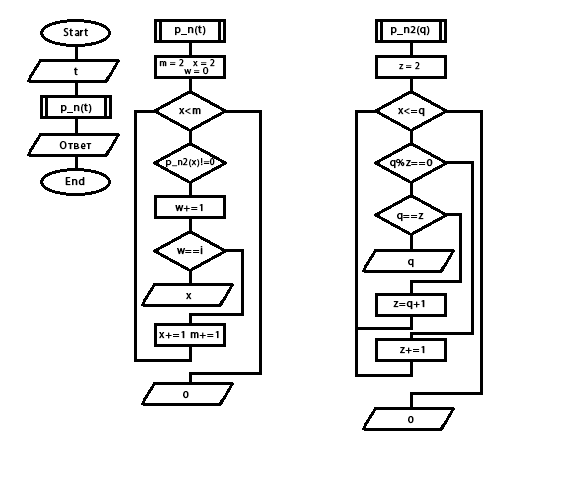
<style>
.page{position:relative;width:565px;height:480px;background:#ffffff}
.page>*{position:absolute;margin:0}
.t1{font:10.7px "MyriadPro-Regular";letter-spacing:0.05em;color:#000000;font-weight:bold}
.t2{font:10.7px/80px "MyriadPro-Regular";letter-spacing:0.05em;color:#000000;font-weight:bold}
.t3{font:9.3px/80px "MyriadPro-Regular";letter-spacing:0.05em;color:#000000;font-weight:bold}
.t4{font:9.3px "MyriadPro-Regular";letter-spacing:0.05em;color:#000000;font-weight:bold}
</style>
<div class="page">
<p class="t1" style="left:63px;top:28px;width:25px;height:9px">Start</p>
<p class="t1" style="left:175px;top:25px;width:31px;height:11px">p_n(t)</p>
<p class="t1" style="left:391px;top:26px;width:39px;height:10px">p_n2(q)</p>
<p class="t2" style="left:159px;top:59px;width:25px;height:8px"><span class="t3">m = 2<br></span>    x = 2<br>    w = 0</p>
<p class="t2" style="left:193px;top:59px;width:22px;height:8px"><span class="t3">x = 2<br></span>    x = 2<br>    w = 0</p>
<p class="t2" style="left:399px;top:62px;width:21px;height:8px"><span class="t3">z = 2<br></span>    x = 2<br>    w = 0</p>
<p class="t1" style="left:74px;top:67px;width:4px;height:9px">t</p>
<p class="t2" style="left:184px;top:67px;width:25px;height:8px"><span class="t3">w = 0<br></span>    x = 2<br>    w = 0</p>
<p class="t1" style="left:61px;top:103px;width:31px;height:11px">p_n(t)</p>
<p class="t1" style="left:179px;top:108px;width:22px;height:7px">x&lt;m</p>
<p class="t1" style="left:398px;top:108px;width:27px;height:9px">x&lt;=q</p>
<p class="t1" style="left:59px;top:141px;width:33px;height:9px">Ответ</p>
<p class="t4" style="left:166px;top:158px;width:49px;height:10px">p_n2(x)!=0</p>
<p class="t1" style="left:390px;top:159px;width:43px;height:10px">q%z==0</p>
<p class="t1" style="left:65px;top:177px;width:20px;height:9px">End</p>
<p class="t1" style="left:175px;top:204px;width:28px;height:8px">w+=1</p>
<p class="t1" style="left:397px;top:213px;width:27px;height:9px">q==z</p>
<p class="t1" style="left:177px;top:246px;width:26px;height:9px">w==i</p>
<p class="t1" style="left:408px;top:259px;width:6px;height:9px">q</p>
<p class="t1" style="left:186px;top:293px;width:6px;height:7px">x</p>
<p class="t1" style="left:393px;top:300px;width:32px;height:10px">z=q+1</p>
<p class="t1" style="left:159px;top:331px;width:60px;height:8px">x+=1 m+=1</p>
<p class="t1" style="left:400px;top:346px;width:25px;height:8px">z+=1</p>
<p class="t1" style="left:183px;top:391px;width:6px;height:8px">0</p>
<p class="t1" style="left:408px;top:416px;width:6px;height:8px">0</p>
</div>
